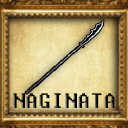
<style>
.page{position:relative;width:128px;height:128px}
.page>*{position:absolute;margin:0}
.t1{font:20.9px "Fixedsys"}
</style>
<div class="page">
<p class="t1" style="left:13px;top:93px;width:102px;height:15px">NAGINATA</p>
</div>
